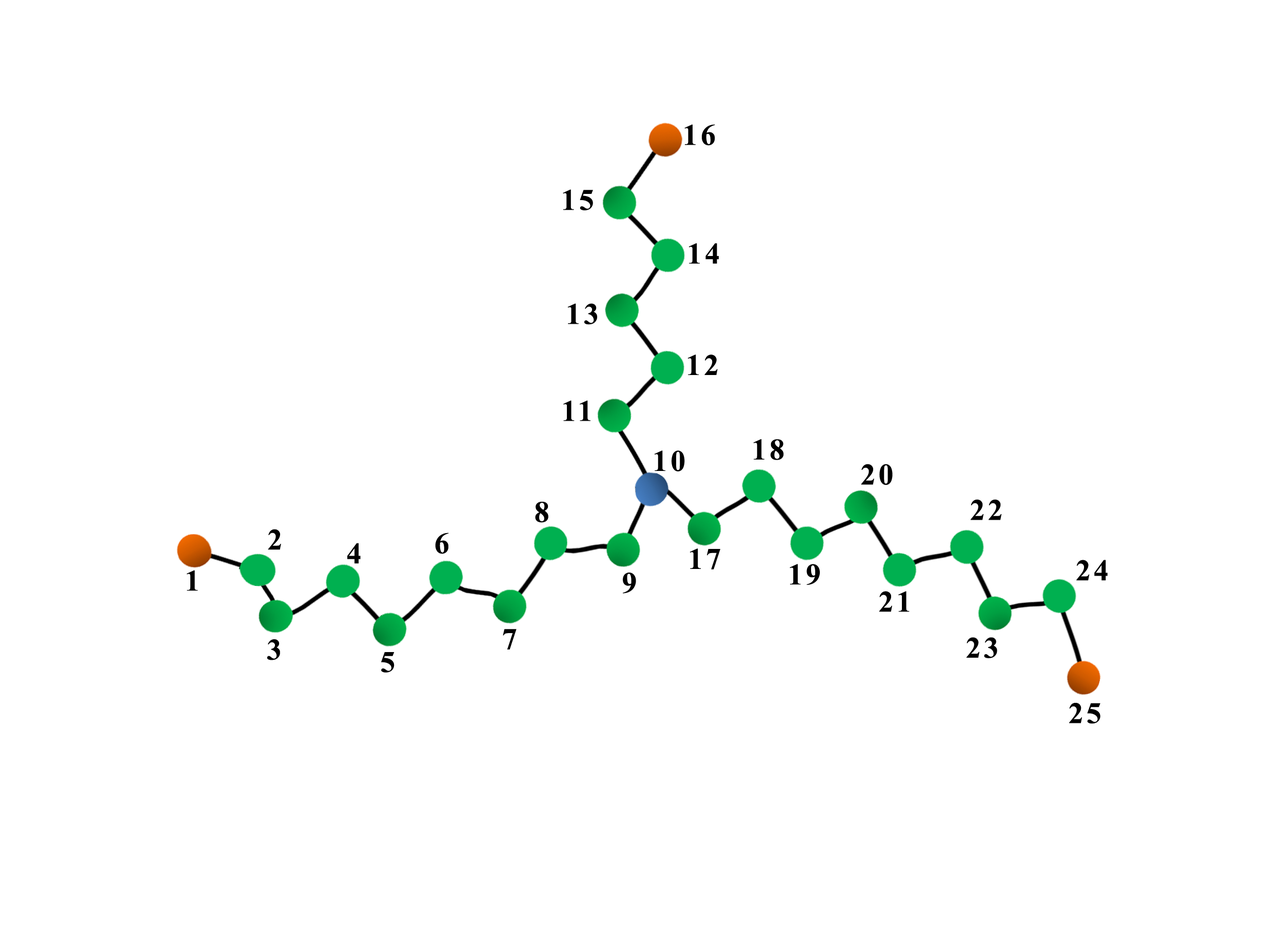
<style>
.page{position:relative;width:1261px;height:945px;background:#ffffff}
.page>*{position:absolute;margin:0}
.t1{font:29.9px "TimesNewRomanPS-BoldMT";letter-spacing:0.1em;color:#000000}
</style>
<div class="page">
<p class="t1" style="left:685px;top:124px;width:30px;height:22px">16</p>
<p class="t1" style="left:563px;top:189px;width:30px;height:21px">15</p>
<p class="t1" style="left:689px;top:243px;width:30px;height:21px">14</p>
<p class="t1" style="left:568px;top:303px;width:29px;height:22px">13</p>
<p class="t1" style="left:688px;top:355px;width:30px;height:20px">12</p>
<p class="t1" style="left:563px;top:400px;width:28px;height:21px">11</p>
<p class="t1" style="left:753px;top:439px;width:31px;height:21px">18</p>
<p class="t1" style="left:654px;top:451px;width:31px;height:21px">10</p>
<p class="t1" style="left:861px;top:464px;width:32px;height:21px">20</p>
<p class="t1" style="left:535px;top:502px;width:14px;height:21px">8</p>
<p class="t1" style="left:971px;top:499px;width:31px;height:21px">22</p>
<p class="t1" style="left:268px;top:529px;width:13px;height:21px">2</p>
<p class="t1" style="left:435px;top:533px;width:14px;height:21px">6</p>
<p class="t1" style="left:347px;top:543px;width:14px;height:21px">4</p>
<p class="t1" style="left:690px;top:549px;width:31px;height:21px">17</p>
<p class="t1" style="left:790px;top:564px;width:30px;height:21px">19</p>
<p class="t1" style="left:1077px;top:560px;width:31px;height:21px">24</p>
<p class="t1" style="left:187px;top:570px;width:11px;height:21px">1</p>
<p class="t1" style="left:623px;top:573px;width:13px;height:21px">9</p>
<p class="t1" style="left:879px;top:591px;width:31px;height:21px">21</p>
<p class="t1" style="left:503px;top:629px;width:14px;height:21px">7</p>
<p class="t1" style="left:267px;top:639px;width:13px;height:21px">3</p>
<p class="t1" style="left:966px;top:637px;width:32px;height:21px">23</p>
<p class="t1" style="left:381px;top:652px;width:14px;height:21px">5</p>
<p class="t1" style="left:1069px;top:703px;width:32px;height:21px">25</p>
</div>
